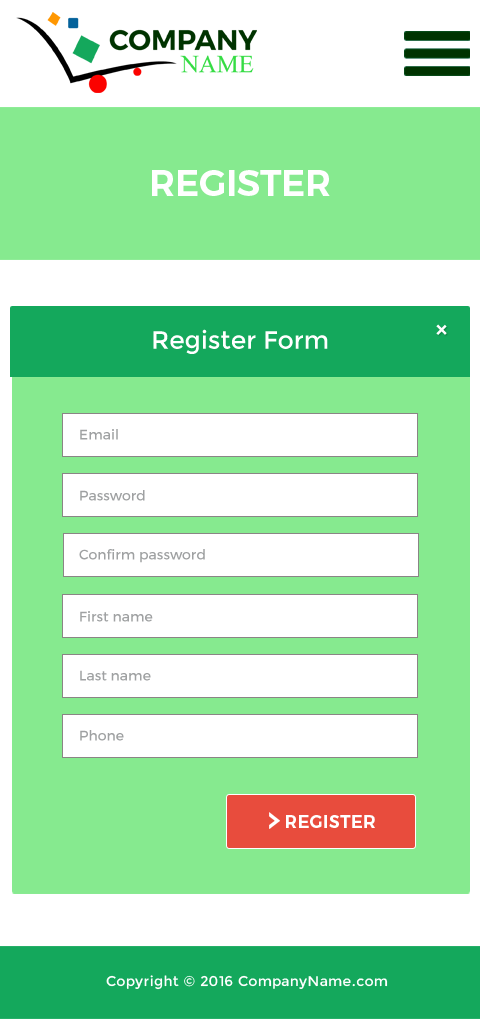
<style>
.page{position:relative;width:480px;height:1019px;background:#ffffff}
.page>*{position:absolute;margin:0}
.t1{font:36px "Montserrat-SemiBold";color:#ffffff;text-transform:uppercase}
.t2{font:24.9px "Montserrat-Regular";color:#ffffff}
.t3{font:24px "HelveticaNeue-Bold";color:#ffffff}
.t4{font:14px "Montserrat-Regular";color:#9fa1a2}
.t5{font:18px "Montserrat-SemiBold";color:#ffffff;text-transform:uppercase}
.t6{font:14px "Montserrat-Regular";letter-spacing:0.025em;color:#ffffff}
</style>
<div class="page">
<p class="t1" style="left:152px;top:170px;width:178px;height:26px">Register</p>
<p class="t2" style="left:153px;top:329px;width:175px;height:25px">Register Form</p>
<p class="t3" style="left:436px;top:324px;width:11px;height:11px;rotate:45deg">+</p>
<p class="t4" style="left:80px;top:429px;width:38px;height:11px">Email</p>
<p class="t4" style="left:80px;top:490px;width:65px;height:11px">Password</p>
<p class="t4" style="left:79px;top:549px;width:126px;height:14px">Confirm password</p>
<p class="t4" style="left:80px;top:611px;width:73px;height:11px">First name</p>
<p class="t4" style="left:80px;top:670px;width:71px;height:11px">Last name</p>
<p class="t4" style="left:80px;top:730px;width:44px;height:11px">Phone</p>
<p class="t5" style="left:286px;top:815px;width:89px;height:13px">Register</p>
<p class="t6" style="left:106px;top:975px;width:282px;height:15px">Copyright © 2016 CompanyName.com</p>
</div>
